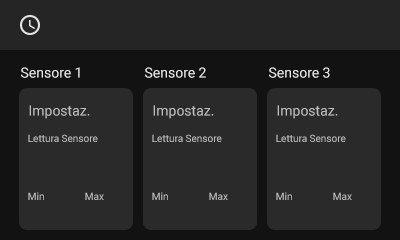
<style>
.page{position:relative;width:400px;height:240px;background:#2a2a2a}
.page>*{position:absolute;margin:0}
.t1{font:14px "Roboto-Regular";color:#eaeaea}
.t2{font:14px "Roboto-Regular";color:#bdbdbd}
.t3{font:10px "Roboto-Regular";color:#bdbdbd}
</style>
<div class="page">
<p class="t1" style="left:21px;top:67px;width:59px;height:11px">Sensore 1</p>
<p class="t1" style="left:145px;top:67px;width:61px;height:11px">Sensore 2</p>
<p class="t1" style="left:269px;top:67px;width:61px;height:11px">Sensore 3</p>
<p class="t2" style="left:29px;top:105px;width:61px;height:14px">Impostaz.</p>
<p class="t2" style="left:153px;top:105px;width:61px;height:14px">Impostaz.</p>
<p class="t2" style="left:277px;top:105px;width:61px;height:14px">Impostaz.</p>
<p class="t3" style="left:28px;top:134px;width:70px;height:8px">Lettura Sensore</p>
<p class="t3" style="left:152px;top:134px;width:70px;height:8px">Lettura Sensore</p>
<p class="t3" style="left:276px;top:134px;width:70px;height:8px">Lettura Sensore</p>
<p class="t3" style="left:28px;top:192px;width:16px;height:8px">Min</p>
<p class="t3" style="left:85px;top:192px;width:19px;height:8px">Max</p>
<p class="t3" style="left:152px;top:192px;width:16px;height:8px">Min</p>
<p class="t3" style="left:209px;top:192px;width:19px;height:8px">Max</p>
<p class="t3" style="left:276px;top:192px;width:16px;height:8px">Min</p>
<p class="t3" style="left:333px;top:192px;width:19px;height:8px">Max</p>
</div>
